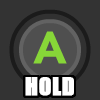
<style>
.page{position:relative;width:100px;height:100px;background:#333333}
.page>*{position:absolute;margin:0}
.t1{font:23.5px "Impact";color:#ffffff;font-weight:bold}
</style>
<div class="page">
<p class="t1" style="left:25px;top:77px;width:49px;height:19px">HOLD</p>
</div>
